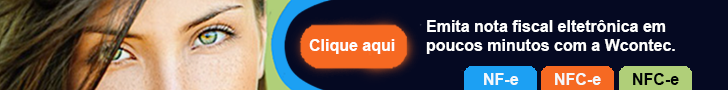
<style>
.page{position:relative;width:728px;height:90px;background:#050922}
.page>*{position:absolute;margin:0}
.t1{font:16px "Arial-BoldMT";color:#fefefe}
.t2{font:16px "Arial-BoldMT";color:#f4f8fa}
.t3{font:16px "Arial-BoldMT";color:#000304}
</style>
<div class="page">
<p class="t1" style="left:426px;top:20px;width:249px;height:34px">Emita nota fiscal eltetrônica em<br>poucos minutos com a Wcontec.</p>
<p class="t1" style="left:309px;top:39px;width:86px;height:15px">Clique aqui</p>
<p class="t2" style="left:484px;top:73px;width:35px;height:12px">NF-e</p>
<p class="t2" style="left:555px;top:73px;width:46px;height:12px">NFC-e</p>
<p class="t3" style="left:633px;top:73px;width:46px;height:12px">NFC-e</p>
</div>
